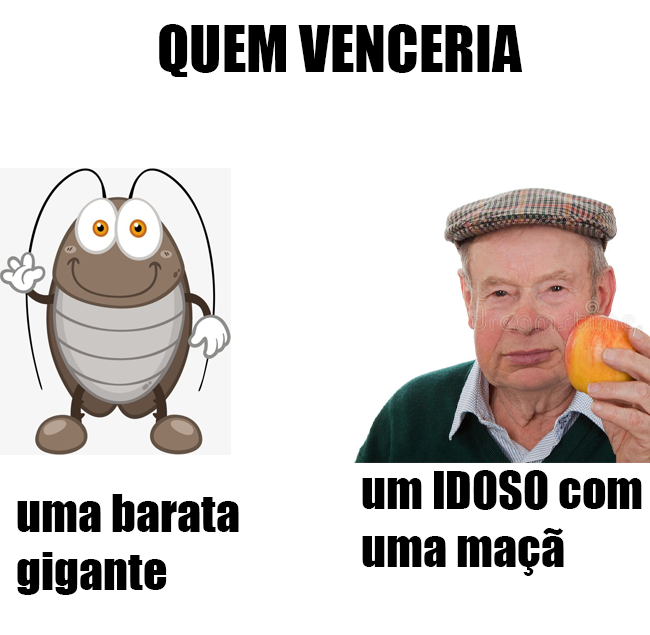
<style>
.page{position:relative;width:650px;height:635px;background:#ffffff}
.page>*{position:absolute;margin:0}
.t1{font:59px "Impact";color:#000000}
.t2{font:48px "Impact";color:#000000}
</style>
<div class="page">
<p class="t1" style="left:159px;top:24px;width:364px;height:53px">QUEM VENCERIA</p>
<p class="t2" style="left:362px;top:470px;width:280px;height:106px">um IDOSO com uma maçã</p>
<p class="t2" style="left:17px;top:494px;width:222px;height:101px">uma barata<br>gigante</p>
</div>
